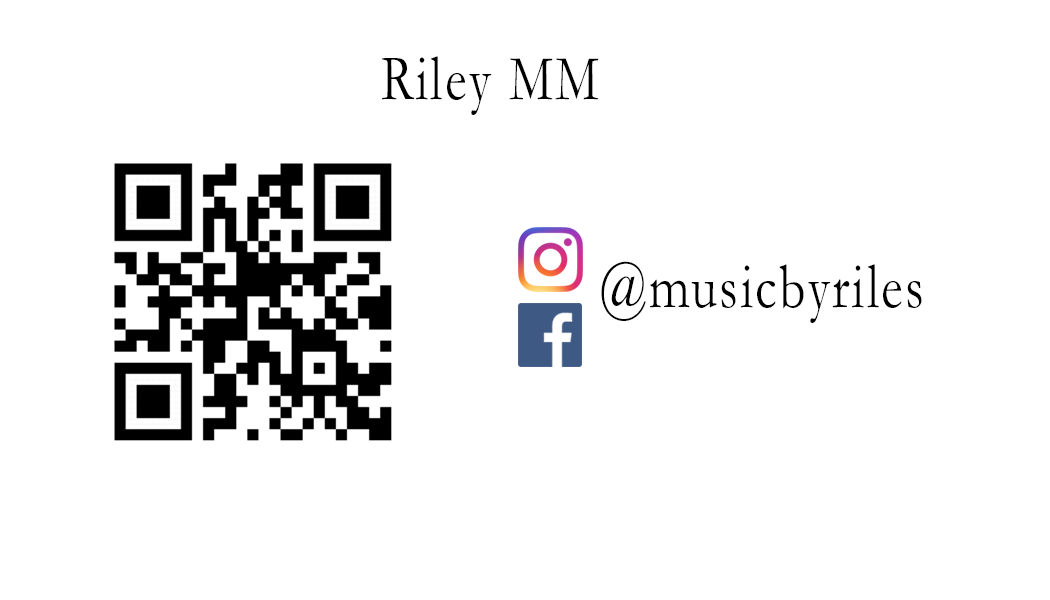
<style>
.page{position:relative;width:1050px;height:600px;background:#ffffff}
.page>*{position:absolute;margin:0}
.t1{font:65px "Garamond";letter-spacing:0.05em;color:#000000;scale:0.8 1}
</style>
<div class="page">
<p class="t1" style="left:382px;top:56px;width:217px;height:59px">Riley MM</p>
<p class="t1" style="left:601px;top:261px;width:321px;height:62px">@musicbyriles</p>
</div>
